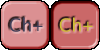
<style>
.page{position:relative;width:100px;height:50px;background:#db9092}
.page>*{position:absolute;margin:0}
.t1{font:18px "LucidaSans";color:#414058}
.t2{font:18px "LucidaSans";color:#cebe38}
</style>
<div class="page">
<p class="t1" style="left:9px;top:17px;width:34px;height:15px">Ch+</p>
<p class="t2" style="left:59px;top:17px;width:34px;height:15px">Ch+</p>
</div>
